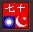
<style>
.page{position:relative;width:33px;height:32px;background:#f20000}
.page>*{position:absolute;margin:0}
.t1{font:10.4px "SimSun";color:#ffffff}
</style>
<div class="page">
<p class="t1" style="left:5px;top:4px;width:20px;height:8px">七十</p>
</div>
